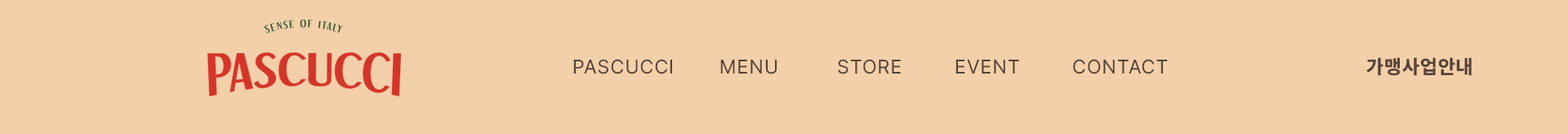
<style>
.page{position:relative;width:1568px;height:134px;background:#f3cfaa}
.page>*{position:absolute;margin:0}
.t1{font:19.6px "Pretendard-Regular";letter-spacing:0.05em;color:#554337}
.t2{font:19.6px "Pretendard-ExtraBold";letter-spacing:0.05em;color:#554337}
</style>
<div class="page">
<p class="t1" style="left:573px;top:57px;width:899px;height:19px">PASCUCCI  MENU  STORE  EVENT  CONTACT       <span class="t2">가맹사업안내</span></p>
</div>
